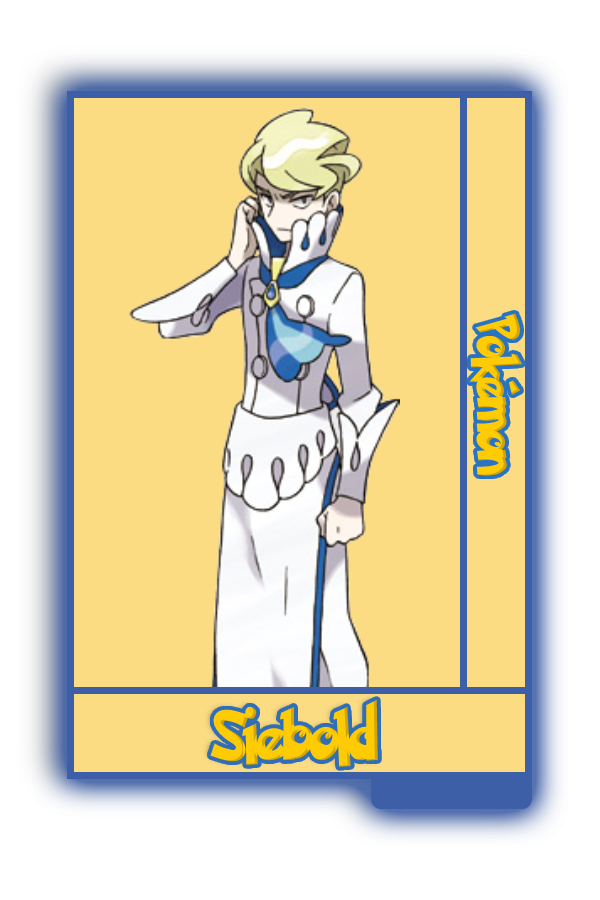
<style>
.page{position:relative;width:600px;height:900px;background:#fbdc83}
.page>*{position:absolute;margin:0}
.t1{font:48.8px "PokemonSolidNormal";color:#ffcb05;scale:0.8 1}
.t2{font:56.6px "PokemonSolidNormal";color:#ffcb05;scale:0.92 1}
</style>
<div class="page">
<p class="t1" style="left:469px;top:313px;width:54px;height:163px;rotate:90deg">Pokémon</p>
<p class="t2" style="left:210px;top:699px;width:168px;height:68px">Siebold</p>
</div>
